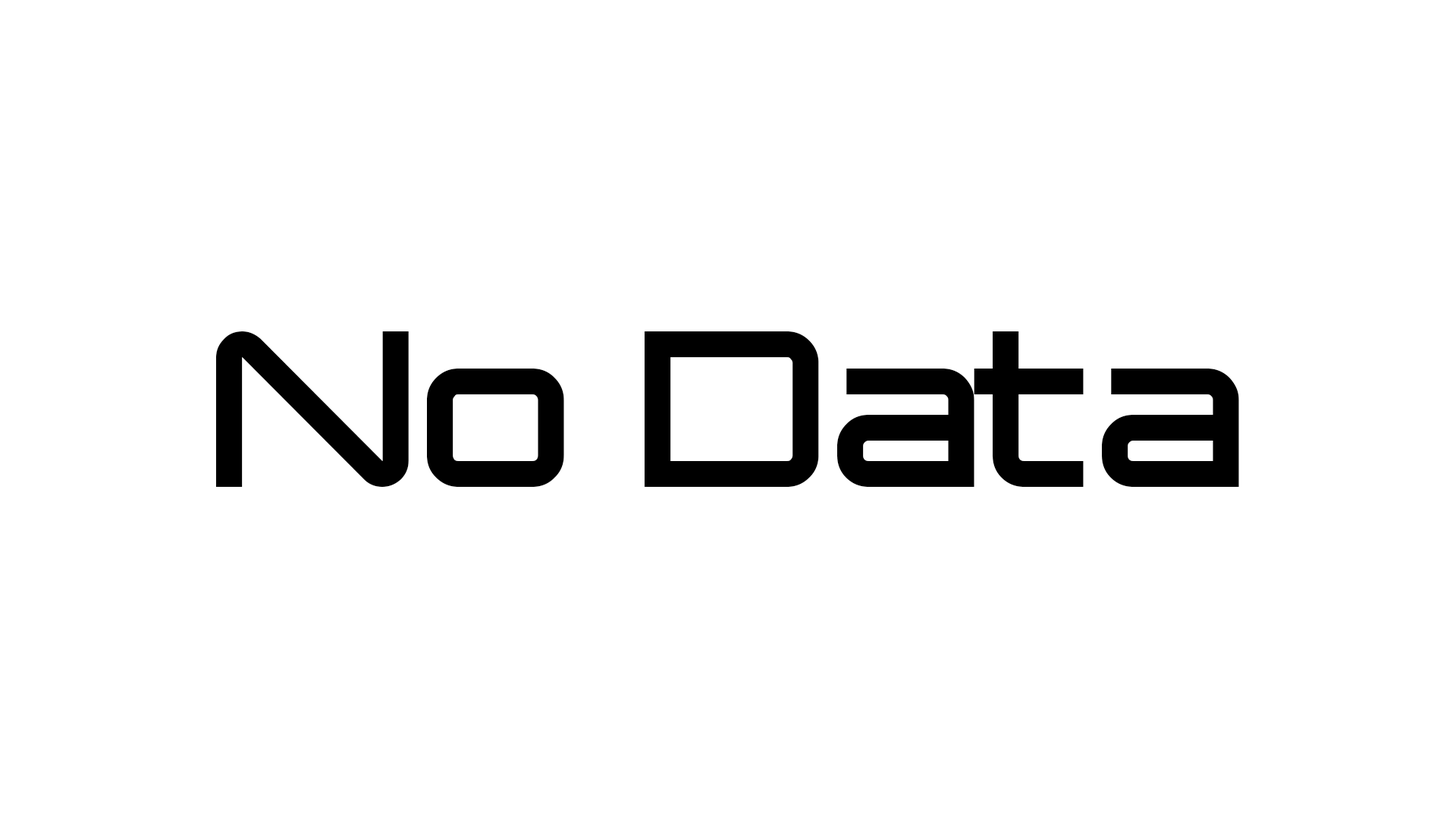
<style>
.page{position:relative;width:1456px;height:819px;background:#ffffff}
.page>*{position:absolute;margin:0}
.t1{font:369.8px "ISL_Jupiter";color:#000000}
</style>
<div class="page">
<p class="t1" style="left:215px;top:331px;width:1024px;height:156px">No Data</p>
</div>
